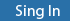
<style>
.page{position:relative;width:70px;height:21px;background:#2970a8}
.page>*{position:absolute;margin:0}
.t1{font:16px "MyriadPro-Regular";color:#ffffff}
</style>
<div class="page">
<p class="t1" style="left:15px;top:5px;width:45px;height:14px">Sing In</p>
</div>
